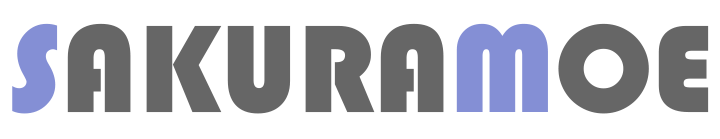
<style>
.page{position:relative;width:720px;height:139px;background:#ffffff}
.page>*{position:absolute;margin:0}
.t1{font:129px "STHupo";color:#666666}
.t2{font:129px "STHupo";color:#848fd5}
</style>
<div class="page">
<p class="t1" style="left:12px;top:23px;width:697px;height:91px"><span class="t2">S</span>AKURA<span class="t2">M</span>OE</p>
</div>
